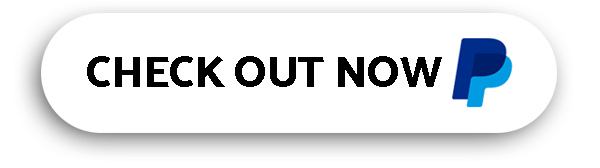
<style>
.page{position:relative;width:600px;height:168px;background:#ffffff}
.page>*{position:absolute;margin:0}
.t1{font:44.1px "MoskExtra-Bold800";color:#000000}
</style>
<div class="page">
<p class="t1" style="left:87px;top:56px;width:355px;height:31px">CHECK OUT NOW</p>
</div>
